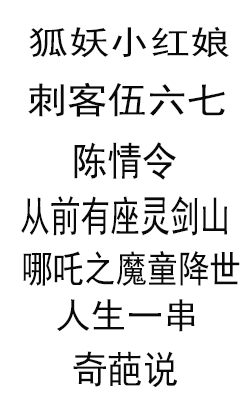
<style>
.page{position:relative;width:250px;height:400px;background:#ffffff}
.page>*{position:absolute;margin:0}
.t1{font:33.3px "SimHei";color:#090909;scale:1.22 1}
.t2{font:36.4px "SimHei";color:#090909;scale:1.1 1}
.t3{font:39.4px "SimHei";color:#090909;scale:0.89 1}
.t4{font:42.3px "SimHei";color:#090909;scale:0.71 1}
.t5{font:37.4px "SimHei";color:#090909;scale:0.84 1}
.t6{font:35.4px "SimHei";color:#090909}
.t7{font:38.4px "SimHei";color:#090909;scale:0.92 1}
</style>
<div class="page">
<p class="t1" style="left:29px;top:26px;width:200px;height:32px">狐妖小红娘</p>
<p class="t2" style="left:28px;top:82px;width:197px;height:35px">刺客伍六七</p>
<p class="t3" style="left:74px;top:142px;width:102px;height:38px">陈情令</p>
<p class="t4" style="left:21px;top:196px;width:206px;height:40px">从前有座灵剑山</p>
<p class="t5" style="left:23px;top:251px;width:217px;height:35px">哪吒之魔童降世</p>
<p class="t6" style="left:57px;top:299px;width:138px;height:33px">人生一串</p>
<p class="t7" style="left:73px;top:351px;width:104px;height:37px">奇葩说</p>
</div>
